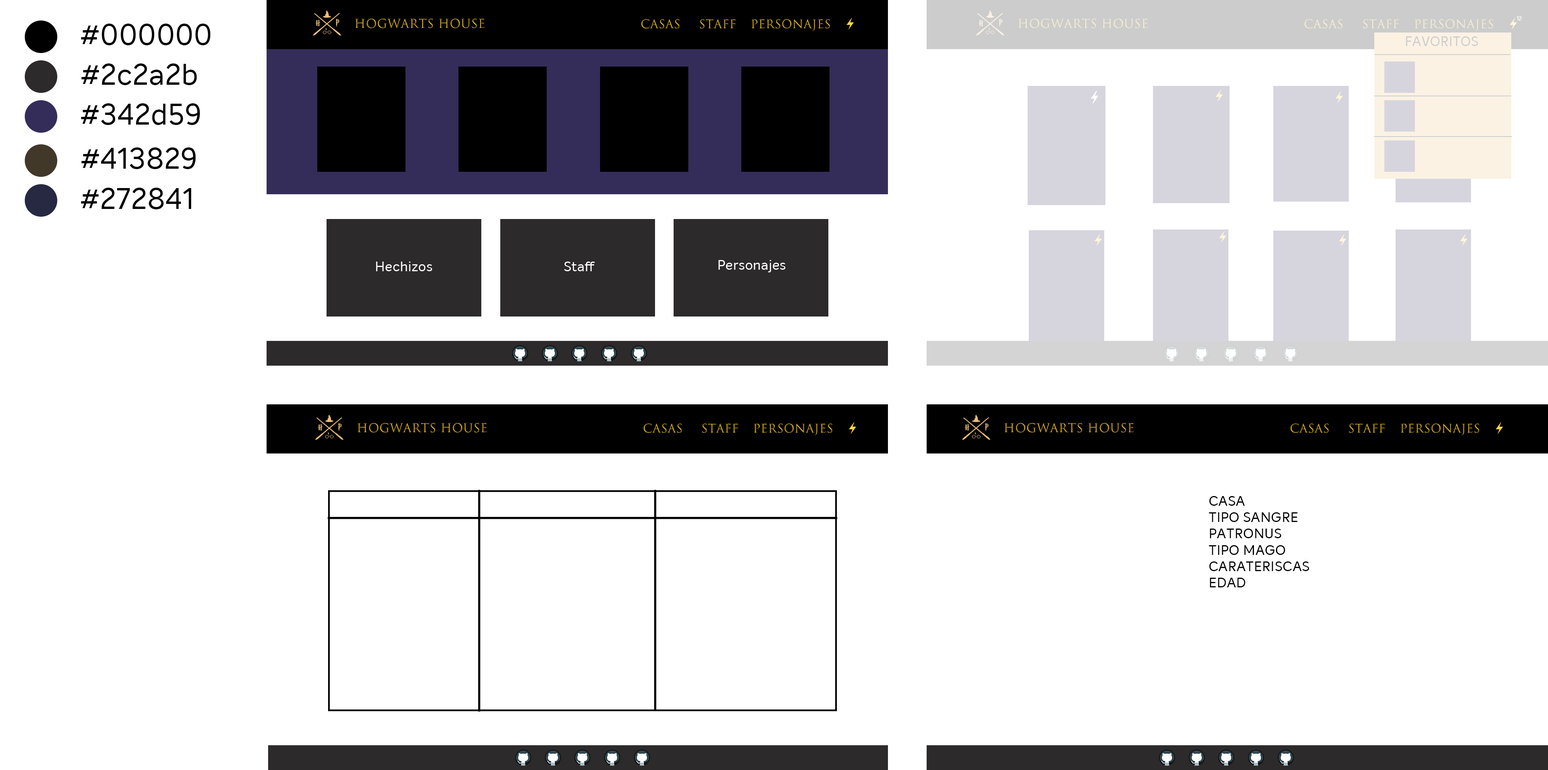
<style>
.page{position:relative;width:1548px;height:770px;background:#ffffff}
.page>*{position:absolute;margin:0}
.t1{font:5.4px "InteloAlt-Regular";letter-spacing:0.02em;color:#ffffff}
.t2{font:29px "InteloAlt-Regular";letter-spacing:0.02em;color:#000000}
.t3{font:13.2px "InteloAlt-Regular";letter-spacing:0.02em;color:#cccccc}
.t4{font:13.6px "InteloAlt-Regular";letter-spacing:0.02em;color:#ffffff}
.t5{font:13.6px "InteloAlt-Regular";letter-spacing:0.02em;color:#000000}
</style>
<div class="page">
<p class="t1" style="left:1517px;top:16px;width:5px;height:5px">12</p>
<p class="t2" style="left:81px;top:24px;width:130px;height:21px">#000000</p>
<p class="t3" style="left:1406px;top:36px;width:72px;height:10px">FAVORITOS</p>
<p class="t2" style="left:81px;top:63px;width:116px;height:22px">#2c2a2b</p>
<p class="t2" style="left:81px;top:103px;width:119px;height:22px">#342d59</p>
<p class="t2" style="left:81px;top:147px;width:115px;height:22px">#413829</p>
<p class="t2" style="left:81px;top:188px;width:111px;height:21px">#272841</p>
<p class="t4" style="left:376px;top:262px;width:56px;height:9px">Hechizos</p>
<p class="t4" style="left:564px;top:262px;width:31px;height:9px">Staff</p>
<p class="t4" style="left:719px;top:260px;width:67px;height:12px">Personajes</p>
<p class="t5" style="left:1209px;top:496px;width:101px;height:91px">CASA <br>TIPO SANGRE<br>PATRONUS<br>TIPO MAGO<br>CARATERISCAS<br>EDAD</p>
</div>
